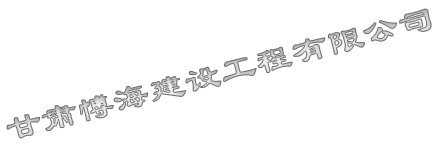
<style>
.page{position:relative;width:442px;height:152px;background:#ffffff}
.page>*{position:absolute;margin:0}
.t1{font:36px "LiSu";font-weight:bold}
</style>
<div class="page">
<p class="t1" style="left:6px;top:8px;width:426px;height:131px;rotate:-15deg">甘肃愽海建设工程有限公司</p>
</div>
